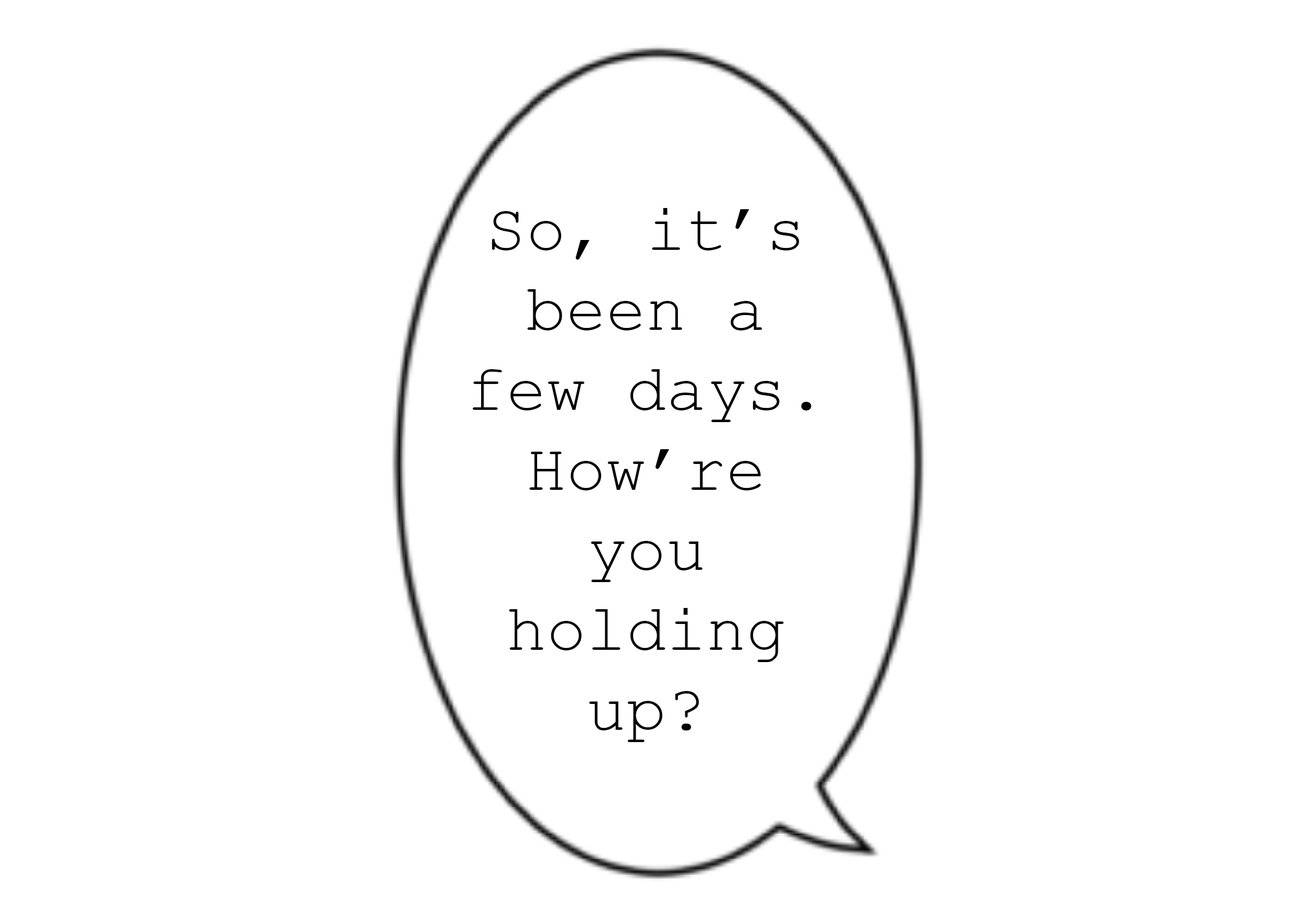
<style>
.page{position:relative;width:1292px;height:923px;background:#ffffff}
.page>*{position:absolute;margin:0}
.t1{font:66.7px "CourierNewPSMT";color:#000000}
</style>
<div class="page">
<p class="t1" style="left:473px;top:208px;width:339px;height:534px;text-align:center">So, it’s been a few days. How’re you holding up?</p>
</div>
